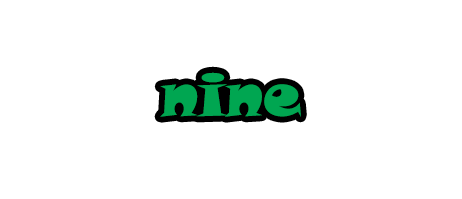
<style>
.page{position:relative;width:462px;height:199px;background:#ffffff}
.page>*{position:absolute;margin:0}
.t1{font:60px "SnapITC-Regular";color:#00a651}
</style>
<div class="page">
<p class="t1" style="left:160px;top:72px;width:141px;height:45px">nine</p>
</div>
